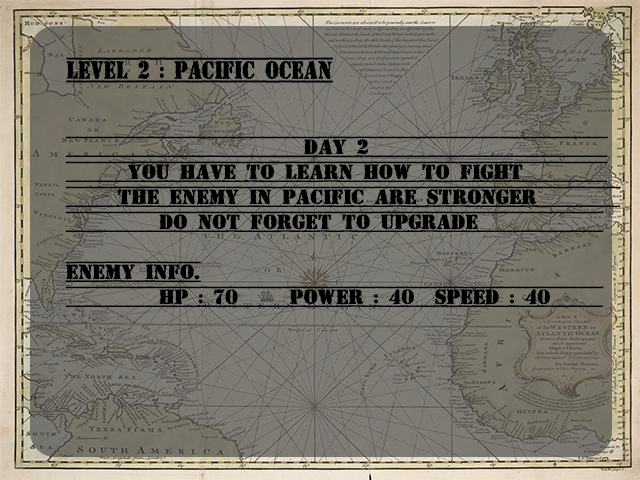
<style>
.page{position:relative;width:640px;height:480px}
.page>*{position:absolute;margin:0}
.t1{font:20.9px "TopSecret";letter-spacing:-0.02em;color:#000000;text-transform:uppercase;font-weight:bold}
</style>
<div class="page">
<p class="t1" style="left:65px;top:136px;width:556px;height:172px">day 2                       <br>      you have to learn how to fight        <br>     the enemy in pacific are stronger        <br>         do not forget to upgrade            <br><br>enemy info.<br>         hp : 70     power : 40  speed : 40</p>
</div>
